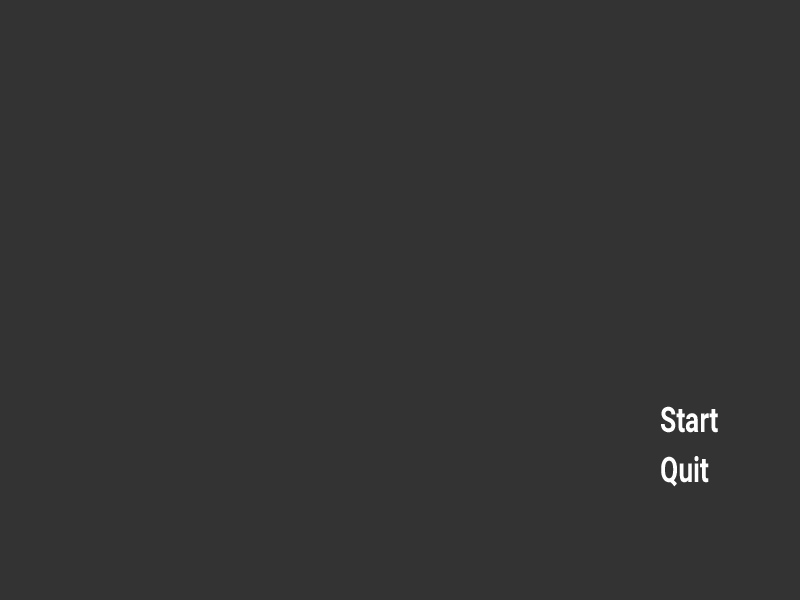
<style>
.page{position:relative;width:800px;height:600px;background:#333333}
.page>*{position:absolute;margin:0}
.t1{font:35px/50px "Roboto-Bold";color:#ffffff;scale:0.75 1}
</style>
<div class="page">
<p class="t1" style="left:661px;top:406px;width:57px;height:81px">Start<br>Quit</p>
</div>
